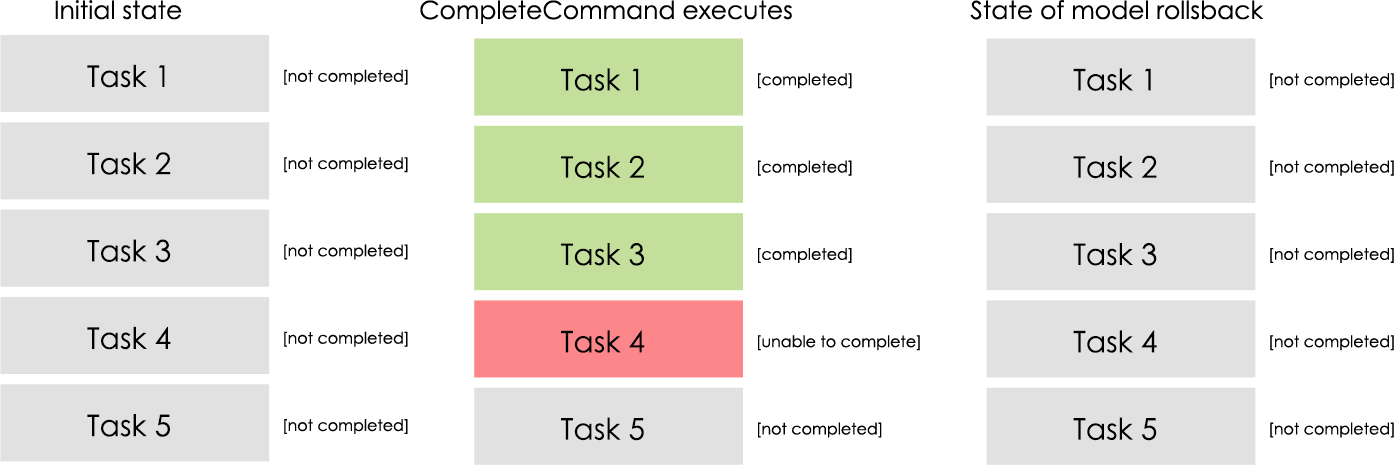
<style>
.page{position:relative;width:1394px;height:465px;background:#ffffff}
.page>*{position:absolute;margin:0}
.t1{font:6px "CenturyGothic";color:#000000}
.t2{font:25px "CenturyGothic";color:#000000}
.t3{font:29.7px "CenturyGothic";color:#000000}
.t4{font:15.9px "CenturyGothic";color:#000000}
</style>
<div class="page">
<p class="t1" style="left:55px;top:0px;width:127px;height:20px">Initial state</p>
<p class="t2" style="left:420px;top:0px;width:372px;height:24px">CompleteCommand executes</p>
<p class="t2" style="left:970px;top:0px;width:294px;height:20px">State of model rollsback</p>
<p class="t3" style="left:87px;top:64px;width:78px;height:24px">Task 1</p>
<p class="t4" style="left:284px;top:69px;width:124px;height:16px">[not completed]</p>
<p class="t3" style="left:561px;top:68px;width:78px;height:23px">Task 1</p>
<p class="t4" style="left:758px;top:73px;width:94px;height:16px">[completed]</p>
<p class="t3" style="left:1073px;top:68px;width:78px;height:23px">Task 1</p>
<p class="t4" style="left:1270px;top:73px;width:124px;height:16px">[not completed]</p>
<p class="t3" style="left:87px;top:152px;width:84px;height:23px">Task 2</p>
<p class="t4" style="left:284px;top:157px;width:124px;height:16px">[not completed]</p>
<p class="t3" style="left:561px;top:155px;width:83px;height:24px">Task 2</p>
<p class="t4" style="left:758px;top:160px;width:94px;height:16px">[completed]</p>
<p class="t3" style="left:1073px;top:155px;width:84px;height:24px">Task 2</p>
<p class="t4" style="left:1270px;top:160px;width:124px;height:16px">[not completed]</p>
<p class="t3" style="left:87px;top:239px;width:84px;height:24px">Task 3</p>
<p class="t4" style="left:284px;top:244px;width:124px;height:16px">[not completed]</p>
<p class="t3" style="left:561px;top:243px;width:83px;height:23px">Task 3</p>
<p class="t3" style="left:1073px;top:243px;width:84px;height:23px">Task 3</p>
<p class="t4" style="left:758px;top:248px;width:94px;height:15px">[completed]</p>
<p class="t4" style="left:1270px;top:248px;width:124px;height:15px">[not completed]</p>
<p class="t3" style="left:87px;top:326px;width:84px;height:24px">Task 4</p>
<p class="t4" style="left:284px;top:331px;width:124px;height:16px">[not completed]</p>
<p class="t3" style="left:561px;top:330px;width:84px;height:23px">Task 4</p>
<p class="t4" style="left:758px;top:335px;width:162px;height:16px">[unable to complete]</p>
<p class="t3" style="left:1073px;top:330px;width:84px;height:23px">Task 4</p>
<p class="t4" style="left:1270px;top:335px;width:124px;height:16px">[not completed]</p>
<p class="t3" style="left:87px;top:414px;width:83px;height:23px">Task 5</p>
<p class="t4" style="left:284px;top:419px;width:124px;height:15px">[not completed]</p>
<p class="t3" style="left:561px;top:417px;width:83px;height:24px">Task 5</p>
<p class="t4" style="left:758px;top:422px;width:124px;height:16px">[not completed]</p>
<p class="t3" style="left:1073px;top:417px;width:84px;height:24px">Task 5</p>
<p class="t4" style="left:1270px;top:422px;width:124px;height:16px">[not completed]</p>
</div>
